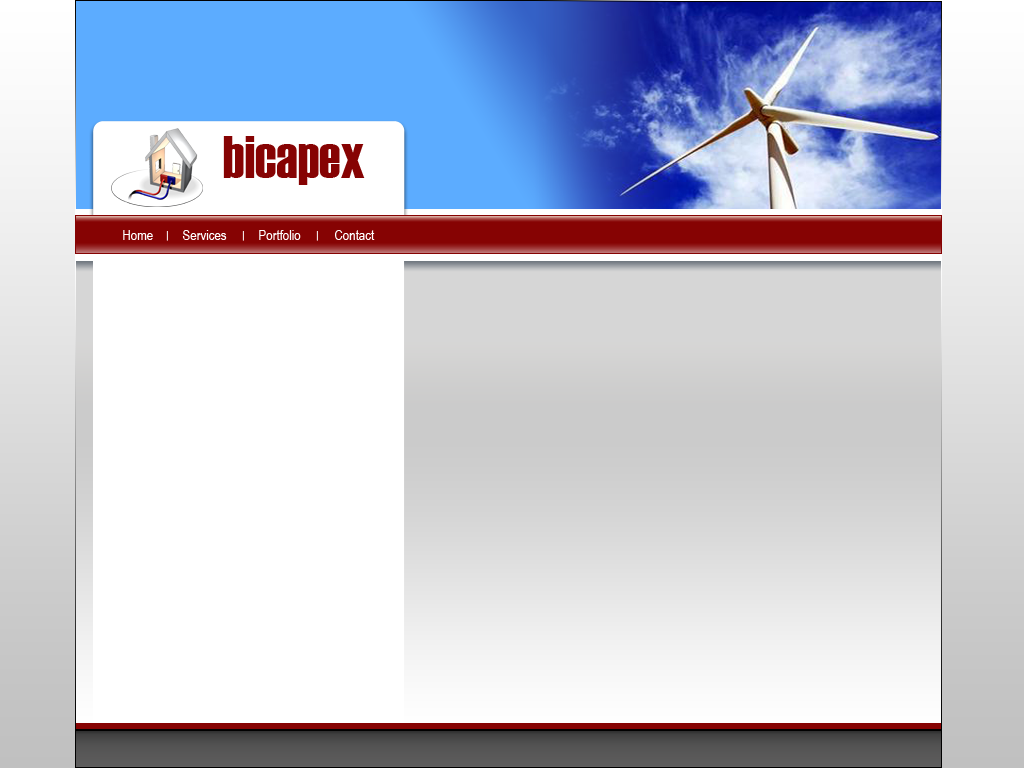
<style>
.page{position:relative;width:1024px;height:768px;background:#ffffff}
.page>*{position:absolute;margin:0}
.t1{font:60px "Haettenschweiler";color:#860303}
.t2{font:14px "ArialNarrow";color:#ffffff}
</style>
<div class="page">
<p class="t1" style="left:223px;top:136px;width:142px;height:49px">bicapex</p>
<p class="t2" style="left:123px;top:230px;width:30px;height:10px">Home</p>
<p class="t2" style="left:182px;top:230px;width:45px;height:10px">Services</p>
<p class="t2" style="left:259px;top:230px;width:42px;height:10px">Portfolio</p>
<p class="t2" style="left:335px;top:230px;width:40px;height:10px">Contact</p>
</div>
